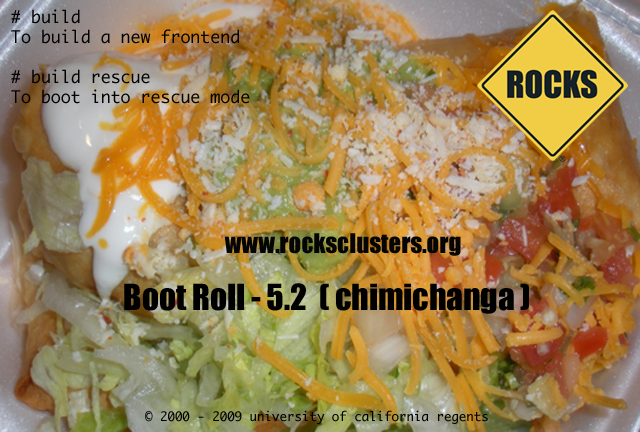
<style>
.page{position:relative;width:640px;height:432px}
.page>*{position:absolute;margin:0}
.t1{font:16.6px "Monaco";color:#000000}
.t2{font:24.9px "Impact";color:#050505}
.t3{font:33.2px "Impact";color:#000000}
.t4{font:12.5px "Monaco";color:#000000}
</style>
<div class="page">
<p class="t1" style="left:11px;top:9px;width:239px;height:95px"># build<br>To build a new frontend<br><br># build rescue<br>To boot into rescue mode</p>
<p class="t2" style="left:224px;top:233px;width:237px;height:23px">www.rocksclusters.org</p>
<p class="t3" style="left:124px;top:283px;width:405px;height:31px">Boot Roll - 5.2  ( chimichanga )</p>
<p class="t4" style="left:145px;top:410px;width:343px;height:14px">© 2000 - 2009 university of california regents</p>
</div>
